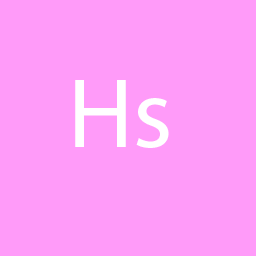
<style>
.page{position:relative;width:256px;height:256px;background:#ff9bf9}
.page>*{position:absolute;margin:0}
.t1{font:100px "MyriadPro-Regular";color:#ffffff}
</style>
<div class="page">
<p class="t1" style="left:75px;top:80px;width:94px;height:68px">Hs</p>
</div>
